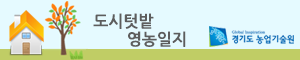
<style>
.page{position:relative;width:300px;height:60px;background:#e5faff}
.page>*{position:absolute;margin:0}
.t1{font:16px/18px "NanumGothicBold";color:#5d5d5d}
</style>
<div class="page">
<p class="t1" style="left:93px;top:13px;width:93px;height:34px;text-align:center">도시텃밭<br>               영농일지</p>
</div>
